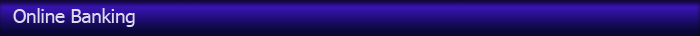
<style>
.page{position:relative;width:700px;height:36px}
.page>*{position:absolute;margin:0}
.t1{font:18.7px "Tahoma";letter-spacing:-0.005em;color:#dadaec}
</style>
<div class="page">
<p class="t1" style="left:13px;top:8px;width:122px;height:19px">Online Banking</p>
</div>
